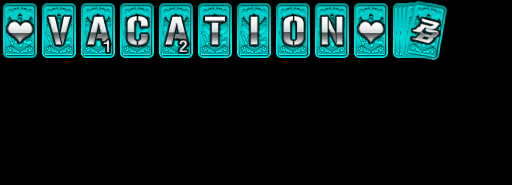
<style>
.page{position:relative;width:512px;height:185px;background:#000000}
.page>*{position:absolute;margin:0}
.t1{font:40px "Gunplay"}
.t2{font:24px "PSL-DisplayBold";color:#d1d3d4}
</style>
<div class="page">
<p class="t1" style="left:48px;top:16px;width:23px;height:29px">V</p>
<p class="t1" style="left:87px;top:16px;width:23px;height:29px">A</p>
<p class="t1" style="left:127px;top:16px;width:21px;height:30px">C</p>
<p class="t1" style="left:165px;top:16px;width:23px;height:29px">A</p>
<p class="t1" style="left:205px;top:16px;width:20px;height:29px">T</p>
<p class="t1" style="left:250px;top:16px;width:8px;height:29px">I</p>
<p class="t1" style="left:283px;top:16px;width:21px;height:30px">O</p>
<p class="t1" style="left:321px;top:16px;width:22px;height:29px">N</p>
<p class="t2" style="left:103px;top:40px;width:6px;height:12px">1</p>
<p class="t2" style="left:179px;top:40px;width:8px;height:12px">2</p>
</div>
